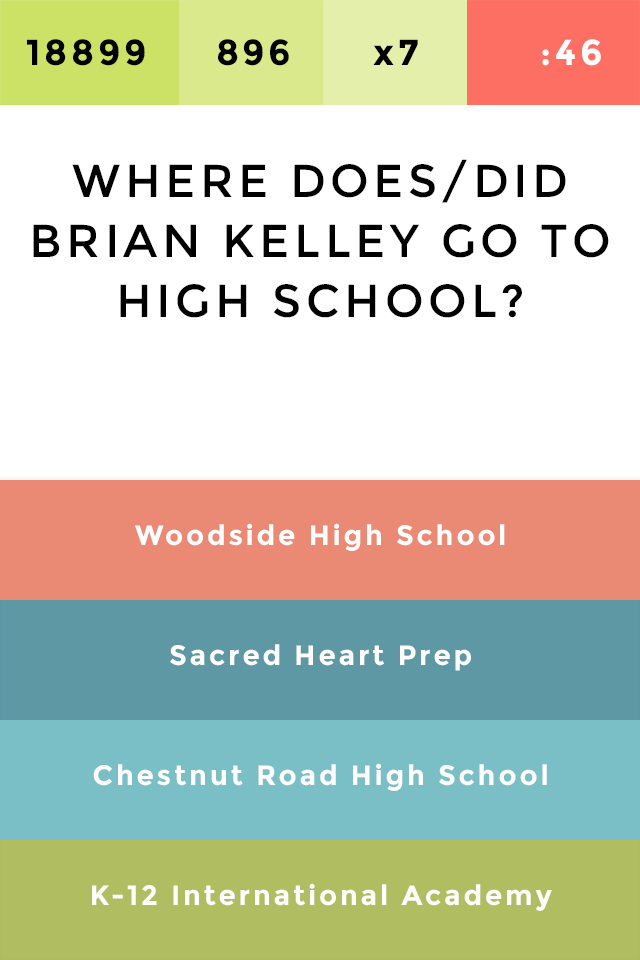
<style>
.page{position:relative;width:640px;height:960px;background:#ffffff}
.page>*{position:absolute;margin:0}
.t1{font:36px "Montserrat-Bold";letter-spacing:0.1em;color:#000000}
.t2{font:36px "Montserrat-Bold";letter-spacing:0.1em;color:#ffffff}
.t3{font:46px/60px "Montserrat-Regular";letter-spacing:0.1em;color:#000000}
.t4{font:28px/120px "Montserrat-Bold";letter-spacing:0.1em;color:#fefefe}
</style>
<div class="page">
<p class="t1" style="left:27px;top:39px;width:574px;height:27px">18899     896      x7         <span class="t2">:46</span></p>
<p class="t3" style="left:33px;top:159px;width:576px;height:159px;text-align:center">WHERE DOES/DID BRIAN KELLEY GO TO HIGH SCHOOL?</p>
<p class="t4" style="left:92px;top:523px;width:460px;height:388px;text-align:center">Woodside High School<br>Sacred Heart Prep<br>Chestnut Road High School<br>K-12 International Academy</p>
</div>
